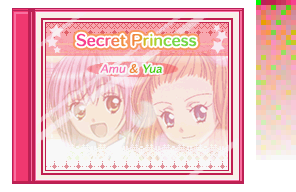
<style>
.page{position:relative;width:296px;height:192px}
.page>*{position:absolute;margin:0}
.t1{font:14px "HummingStd-B";letter-spacing:0.02em}
.t2{font:10px "HummingStd-D";letter-spacing:0.02em;color:#f870b0;font-style:italic}
.t3{font:10px "HummingStd-D";letter-spacing:0.02em;color:#f08838;font-style:italic}
.t4{font:10px "HummingStd-D";letter-spacing:0.02em;color:#48d008;font-style:italic}
</style>
<div class="page">
<p class="t1" style="left:76px;top:33px;width:121px;height:14px">Secret Princess</p>
<p class="t2" style="left:100px;top:64px;width:62px;height:9px">Amu <span class="t3">&amp; </span><span class="t4">Yua</span></p>
</div>
